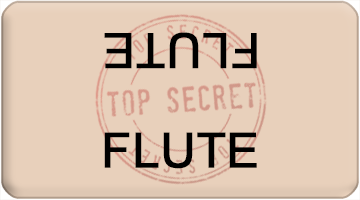
<style>
.page{position:relative;width:360px;height:200px;background:#e8d0bb}
.page>*{position:absolute;margin:0}
.t1{font:48px "ArialMT";color:#000000;font-weight:bold}
</style>
<div class="page">
<p class="t1" style="left:104px;top:32px;width:153px;height:37px;rotate:180deg">FLUTE</p>
<p class="t1" style="left:104px;top:132px;width:153px;height:37px">FLUTE</p>
</div>
